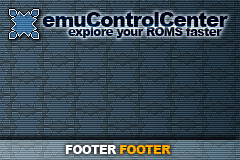
<style>
.page{position:relative;width:240px;height:160px}
.page>*{position:absolute;margin:0}
.t1{font:20px "Arial-Black";letter-spacing:-0.05em}
.t2{font:12px "Arial-Black";letter-spacing:-0.05em}
.t3{font:12px "Arial-Black";letter-spacing:-0.05em;color:#ffffff}
.t4{font:12px "Arial-Black";letter-spacing:-0.05em;color:#f99800}
</style>
<div class="page">
<p class="t1" style="left:42px;top:12px;width:186px;height:15px">emuControlCenter</p>
<p class="t2" style="left:68px;top:27px;width:154px;height:11px">explore your ROMS faster</p>
<p class="t3" style="left:65px;top:145px;width:106px;height:9px">FOOTER <span class="t4">FOOTER</span></p>
</div>
